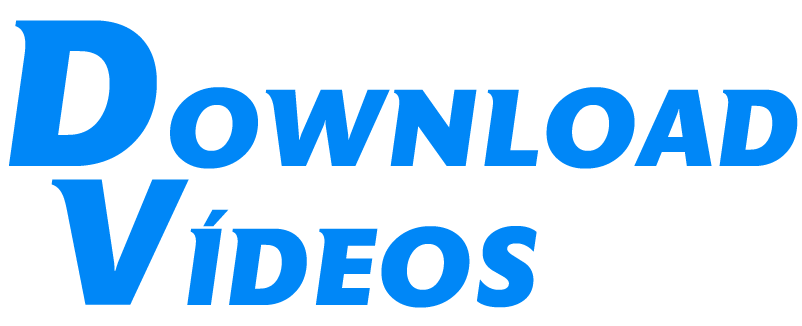
<style>
.page{position:relative;width:802px;height:326px;background:#ffffff}
.page>*{position:absolute;margin:0}
.t1{font:109.3px "AstoriaExtraBoldItalic";color:#0087f7;text-transform:uppercase}
.t2{font:208.3px "AstoriaExtraBoldItalic";color:#0087f7;text-transform:uppercase}
.t3{font:179.3px "AstoriaExtraBoldItalic";color:#0087f7;text-transform:uppercase}
</style>
<div class="page">
<p class="t1" style="left:9px;top:20px;width:789px;height:149px"><span class="t2">d</span>ownload</p>
<p class="t1" style="left:51px;top:179px;width:486px;height:129px"><span class="t3">v</span>ídeos</p>
</div>
